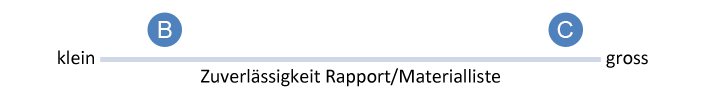
<style>
.page{position:relative;width:717px;height:90px;background:#ffffff}
.page>*{position:absolute;margin:0}
.t1{font:24px "ArialMT";color:#ffffff}
.t2{font:20px "Calibri";color:#000000}
</style>
<div class="page">
<p class="t1" style="left:158px;top:21px;width:14px;height:17px">B</p>
<p class="t1" style="left:557px;top:21px;width:16px;height:17px">C</p>
<p class="t2" style="left:58px;top:50px;width:36px;height:15px">klein</p>
<p class="t2" style="left:606px;top:54px;width:42px;height:14px">gross</p>
<p class="t2" style="left:201px;top:68px;width:299px;height:19px">Zuverlässigkeit Rapport/Materialliste</p>
</div>
